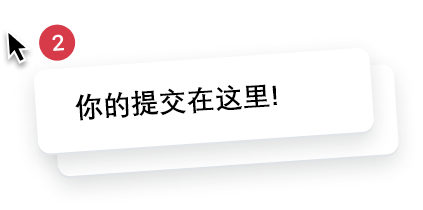
<style>
.page{position:relative;width:423px;height:210px;background:#ffffff}
.page>*{position:absolute;margin:0}
.t1{font:28px "DengXian-Bold";color:#000000}
</style>
<div class="page">
<p class="t1" style="left:75px;top:84px;width:202px;height:37px;rotate:-4deg">你的提交在这里!</p>
</div>
